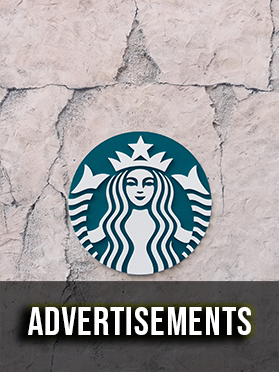
<style>
.page{position:relative;width:279px;height:372px}
.page>*{position:absolute;margin:0}
.t1{font:40px "BebasNeue-Regular";letter-spacing:0.025em;color:#ffffff}
</style>
<div class="page">
<p class="t1" style="left:28px;top:307px;width:223px;height:28px">Advertisements</p>
</div>
